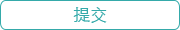
<style>
.page{position:relative;width:180px;height:30px;background:#ffffff}
.page>*{position:absolute;margin:0}
.t1{font:17px "STHeitiSC-Light";color:#35aaaa;text-transform:uppercase}
</style>
<div class="page">
<p class="t1" style="left:73px;top:7px;width:34px;height:16px">提交</p>
</div>
